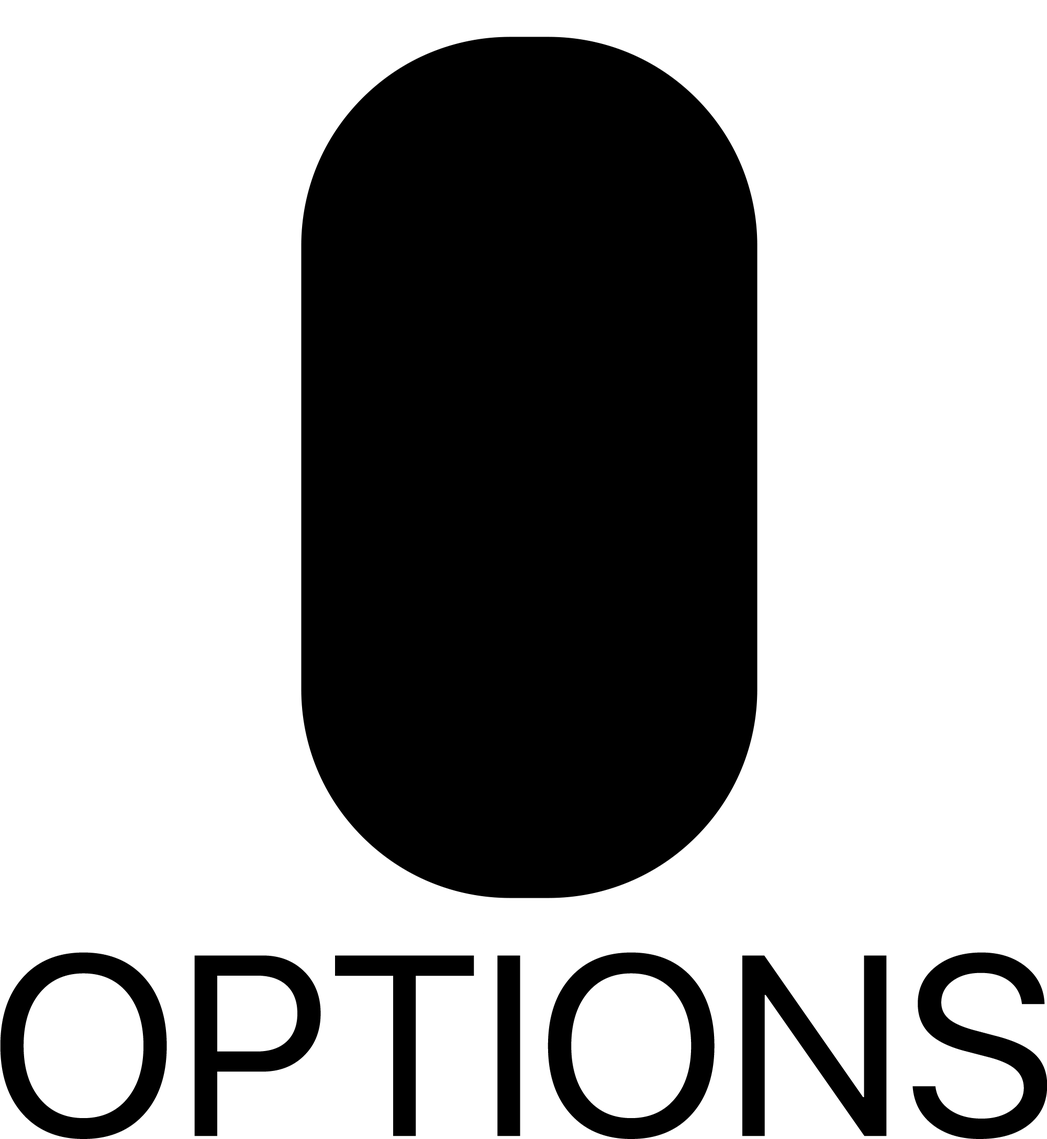
<style>
.page{position:relative;width:1047px;height:1139px;background:#ffffff}
.page>*{position:absolute;margin:0}
.t1{font:256px "SFUIDisplay-Regular";color:#000000}
</style>
<div class="page">
<p class="t1" style="left:0px;top:952px;width:1047px;height:187px">OPTIONS</p>
</div>
